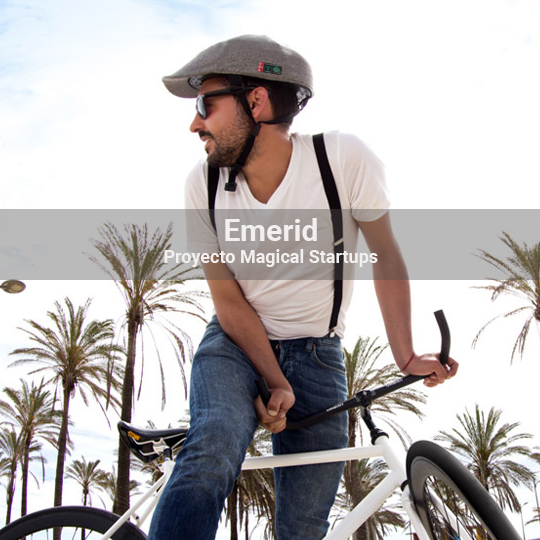
<style>
.page{position:relative;width:540px;height:540px;background:#ffffff}
.page>*{position:absolute;margin:0}
.t1{font:18px "Roboto-Bold";color:#f2efef}
.t2{font:30px "Roboto-Bold";color:#f2efef}
</style>
<div class="page">
<p class="t1" style="left:164px;top:218px;width:214px;height:49px;text-align:center"><span class="t2">Emerid<br></span>Proyecto Magical Startups</p>
</div>
